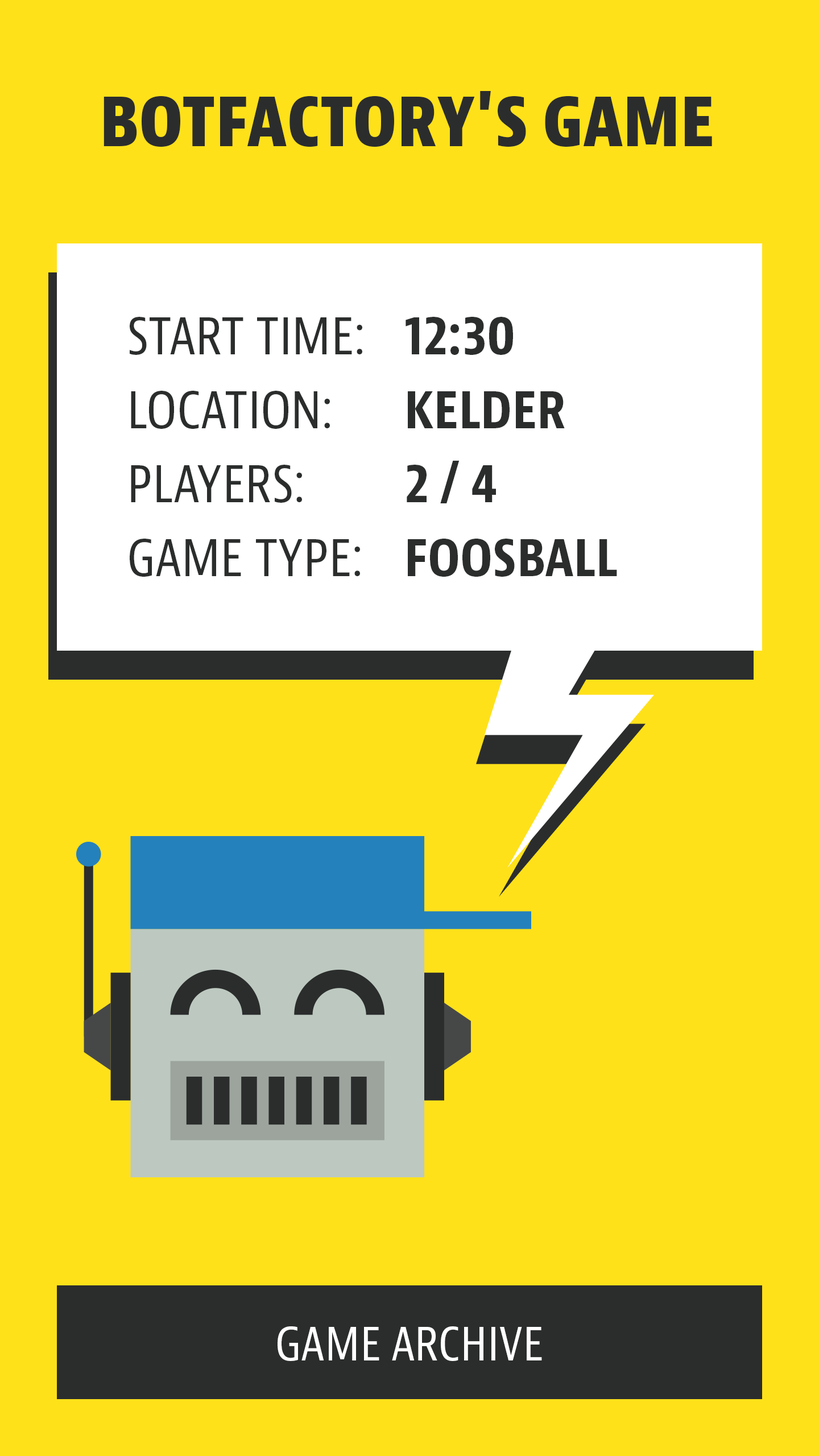
<style>
.page{position:relative;width:819px;height:1456px;background:#ffe11a}
.page>*{position:absolute;margin:0}
.t1{font:71.7px "BerninaSans-CondensedExtrabold";color:#2b2d2d;text-transform:uppercase}
.t2{font:54px/73.9px "BerninaSans-CondensedRegular";color:#2b2d2d;text-transform:uppercase}
.t3{font:54px/73.9px "BerninaSans-CondensedBold";color:#2b2d2d;text-transform:uppercase}
.t4{font:48.9px "BerninaSans-CondensedRegular";color:#ffffff;text-transform:uppercase}
</style>
<div class="page">
<p class="t1" style="left:104px;top:91px;width:608px;height:56px">BOTFACTORY's game</p>
<p class="t2" style="left:130px;top:317px;width:487px;height:260px">Start Time:   <span class="t3">12:30<br></span>Location:   <span class="t3">kelder<br></span>Players:    <span class="t3">2 / 4</span><br>Game Type:   <span class="t3">foosball</span></p>
<p class="t4" style="left:278px;top:1326px;width:264px;height:35px">Game Archive</p>
</div>
